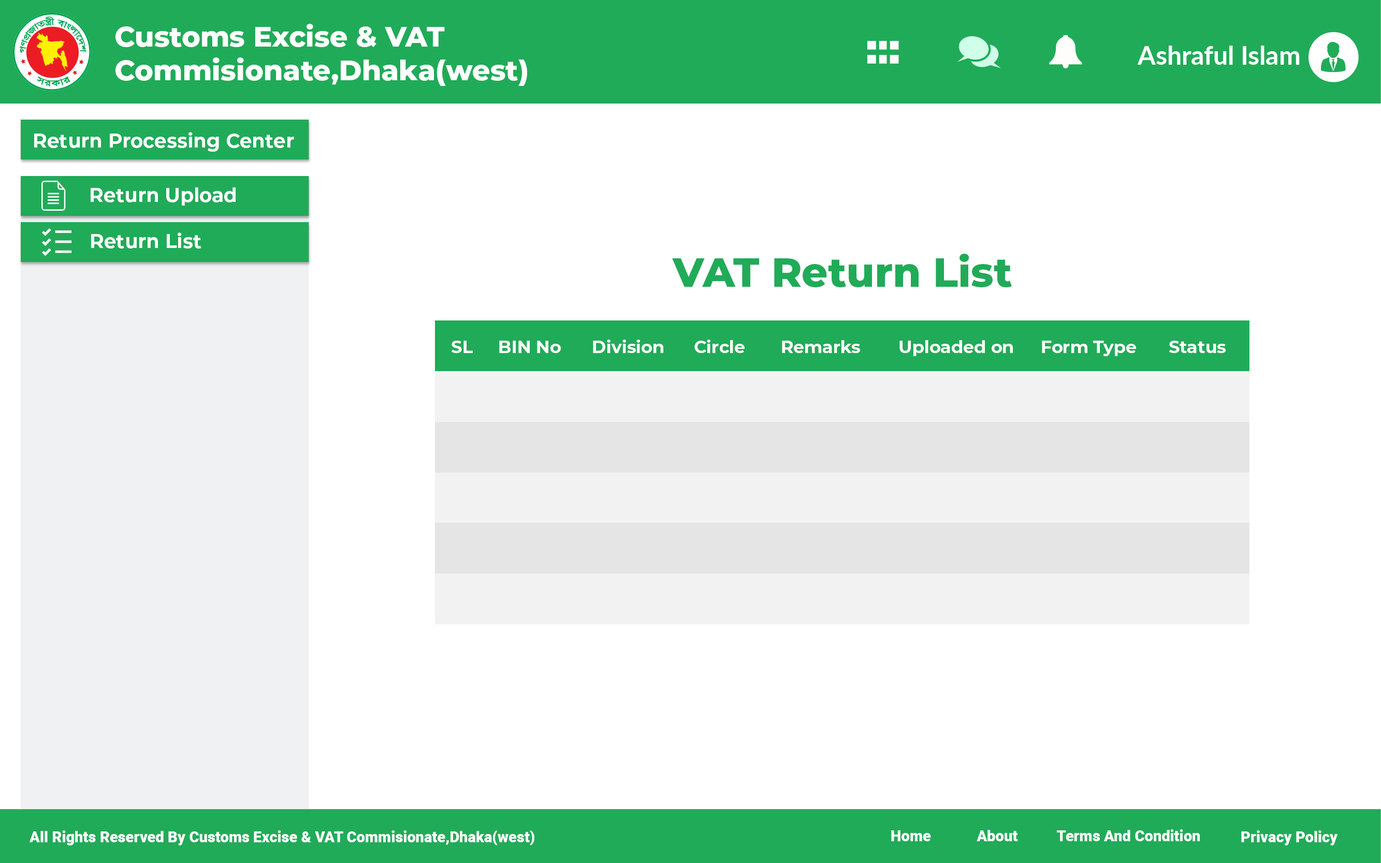
<style>
.page{position:relative;width:1381px;height:863px;background:#ffffff}
.page>*{position:absolute;margin:0}
.t1{font:28.1px "Montserrat-ExtraBold";color:#ffffff}
.t2{font:25.9px "Lato-Bold";color:#ffffff}
.t3{font:19.4px "Montserrat-Bold";color:#ffffff}
.t4{font:41px "Montserrat-ExtraBold";color:#20ab58}
.t5{font:17.3px "Montserrat-Bold";color:#ffffff}
.t6{font:15.1px "Roboto-Black";color:#ffffff}
</style>
<div class="page">
<p class="t1" style="left:115px;top:24px;width:412px;height:62px">Customs Excise &amp; VAT<br>Commisionate,Dhaka(west)</p>
<p class="t2" style="left:1137px;top:46px;width:163px;height:19px">Ashraful Islam</p>
<p class="t3" style="left:34px;top:132px;width:260px;height:20px">Return Processing Center</p>
<p class="t3" style="left:91px;top:187px;width:145px;height:19px">Return Upload</p>
<p class="t3" style="left:91px;top:233px;width:110px;height:16px">Return List</p>
<p class="t4" style="left:672px;top:254px;width:340px;height:33px">VAT Return List</p>
<p class="t5" style="left:452px;top:341px;width:21px;height:12px">SL</p>
<p class="t5" style="left:499px;top:341px;width:62px;height:12px">BIN No</p>
<p class="t5" style="left:593px;top:340px;width:70px;height:13px">Division</p>
<p class="t5" style="left:694px;top:340px;width:51px;height:13px">Circle</p>
<p class="t5" style="left:782px;top:340px;width:78px;height:13px">Remarks</p>
<p class="t5" style="left:900px;top:340px;width:113px;height:16px">Uploaded on</p>
<p class="t5" style="left:1042px;top:341px;width:94px;height:15px">Form Type</p>
<p class="t5" style="left:1169px;top:341px;width:57px;height:12px">Status</p>
<p class="t6" style="left:30px;top:831px;width:504px;height:15px">All Rights Reserved By Customs Excise &amp; VAT Commisionate,Dhaka(west)</p>
<p class="t6" style="left:891px;top:831px;width:40px;height:11px">Home</p>
<p class="t6" style="left:977px;top:830px;width:41px;height:12px">About</p>
<p class="t6" style="left:1057px;top:830px;width:143px;height:12px">Terms And Condition</p>
<p class="t6" style="left:1241px;top:831px;width:97px;height:15px">Privacy Policy</p>
</div>
